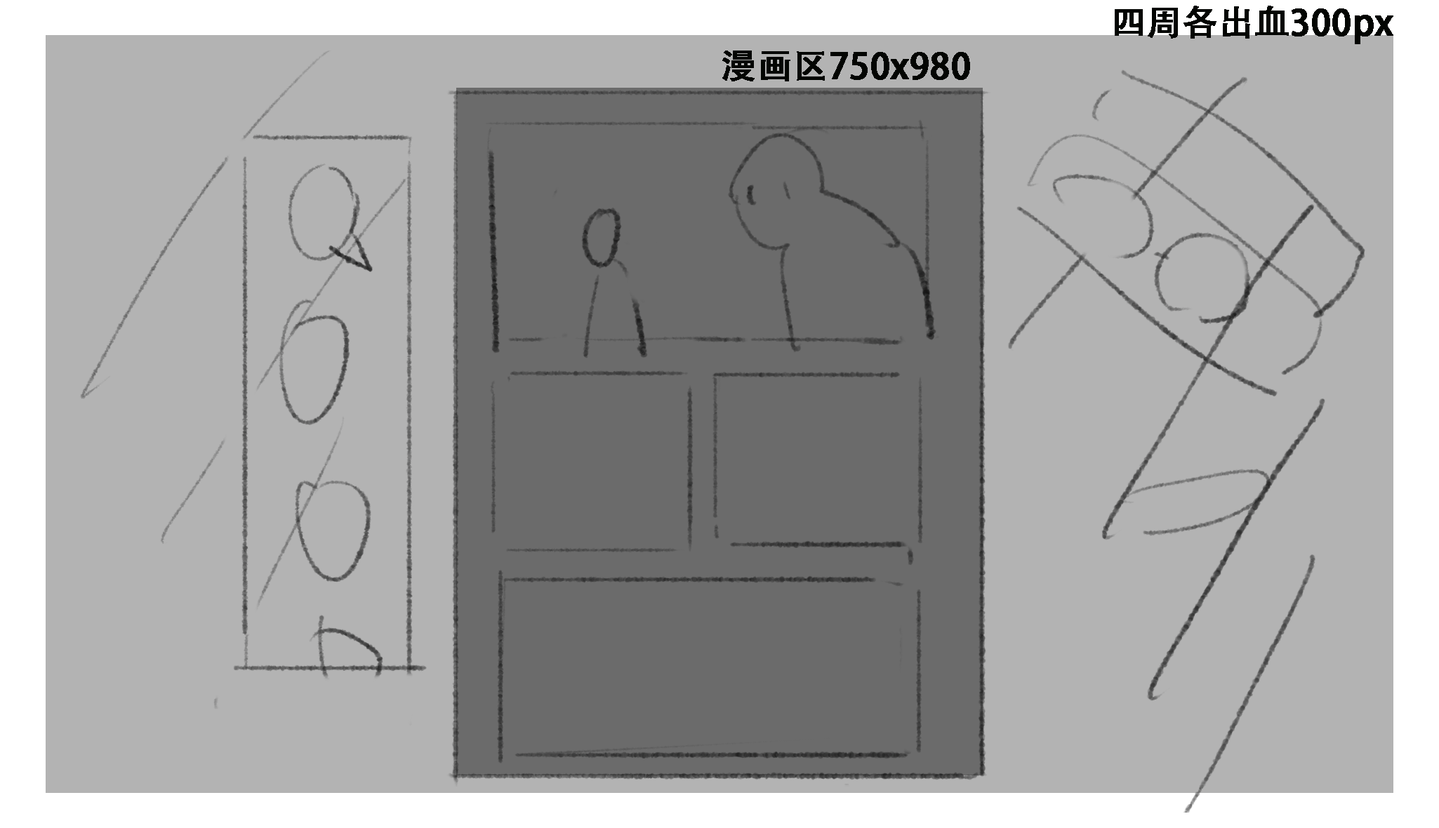
<style>
.page{position:relative;width:1439px;height:828px;background:#b3b3b3}
.page>*{position:absolute;margin:0}
.t1{font:35.1px "AdobeHeitiStd-Regular";color:#030502;font-weight:bold}
</style>
<div class="page">
<p class="t1" style="left:1115px;top:6px;width:279px;height:38px">四周各出血300px</p>
<p class="t1" style="left:722px;top:51px;width:248px;height:30px">漫画区750x980</p>
</div>
